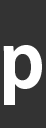
<style>
.page{position:relative;width:46px;height:128px;background:#333333}
.page>*{position:absolute;margin:0}
.t1{font:75px "AdobeGothicStd-Bold";color:#ffffff}
</style>
<div class="page">
<p class="t1" style="left:3px;top:45px;width:39px;height:60px">p</p>
</div>
